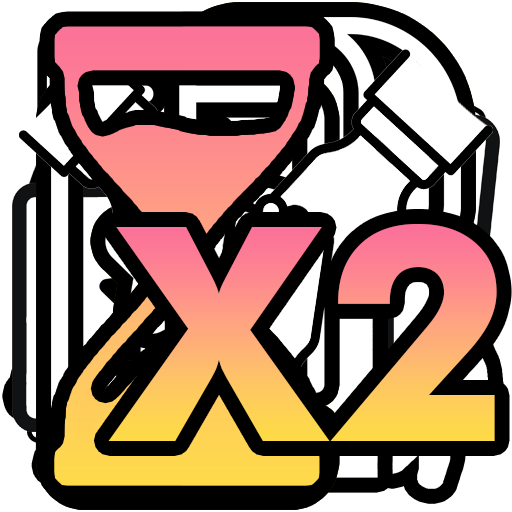
<style>
.page{position:relative;width:512px;height:512px;background:#000000}
.page>*{position:absolute;margin:0}
.t1{font:300px "Futura-Bold"}
</style>
<div class="page">
<p class="t1" style="left:108px;top:224px;width:389px;height:217px">X2</p>
</div>
